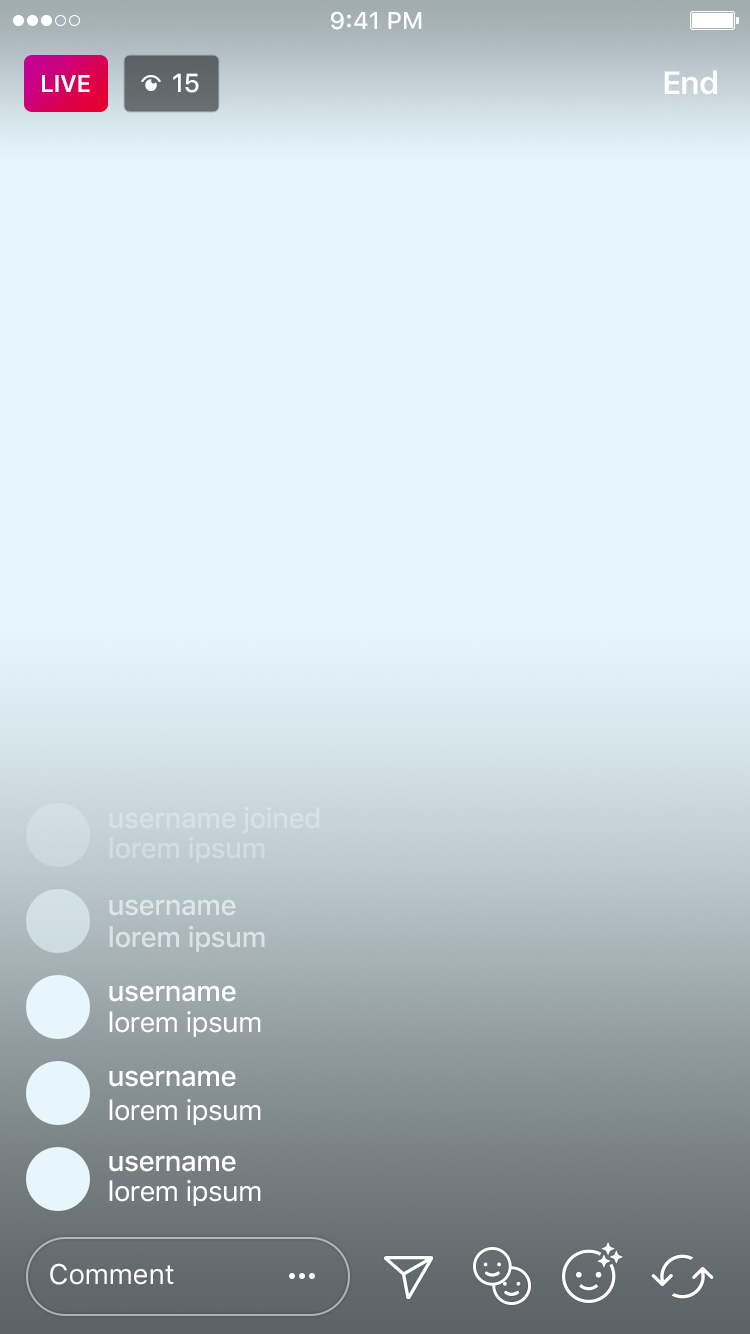
<style>
.page{position:relative;width:750px;height:1334px;background:#e6f6fc}
.page>*{position:absolute;margin:0}
.t1{font:24px "SFUIText-Semibold";letter-spacing:-0.025em;color:#ffffff}
.t2{font:26px "SFUIText-Medium";letter-spacing:-0.025em;color:#ffffff}
.t3{font:32px "SFUIText-Semibold";letter-spacing:-0.025em;color:#ffffff}
.t4{font:28px "SFUIText-Medium";letter-spacing:-0.025em;color:#d7e1e4}
.t5{font:28px "SFUIText-Medium";letter-spacing:-0.025em;color:#d3dce0}
.t6{font:28px "SFUIText-Medium";letter-spacing:-0.025em;color:#e1e5e7}
.t7{font:28px "SFUIText-Medium";letter-spacing:-0.025em;color:#dde2e4}
.t8{font:28px "SFUIText-Medium";letter-spacing:-0.025em;color:#ffffff}
.t9{font:28px "SFUIText-Regular";letter-spacing:-0.025em;color:#ffffff}
.t10{font:28px "SFUIText-Regular";letter-spacing:-0.01em;color:#ffffff}
</style>
<div class="page">
<p class="t1" style="left:42px;top:75px;width:48px;height:17px">LIVE</p>
<p class="t2" style="left:173px;top:73px;width:26px;height:20px">15</p>
<p class="t3" style="left:664px;top:70px;width:53px;height:25px">End</p>
<p class="t4" style="left:109px;top:807px;width:211px;height:27px">username joined</p>
<p class="t5" style="left:109px;top:837px;width:156px;height:26px">lorem ipsum</p>
<p class="t6" style="left:109px;top:899px;width:127px;height:17px">username</p>
<p class="t7" style="left:109px;top:926px;width:156px;height:26px">lorem ipsum</p>
<p class="t8" style="left:109px;top:985px;width:127px;height:17px">username</p>
<p class="t9" style="left:109px;top:1011px;width:152px;height:26px">lorem ipsum</p>
<p class="t8" style="left:109px;top:1070px;width:127px;height:17px">username</p>
<p class="t9" style="left:109px;top:1099px;width:152px;height:26px">lorem ipsum</p>
<p class="t8" style="left:109px;top:1155px;width:127px;height:17px">username</p>
<p class="t9" style="left:109px;top:1180px;width:152px;height:26px">lorem ipsum</p>
<p class="t10" style="left:50px;top:1263px;width:124px;height:22px">Comment</p>
</div>
